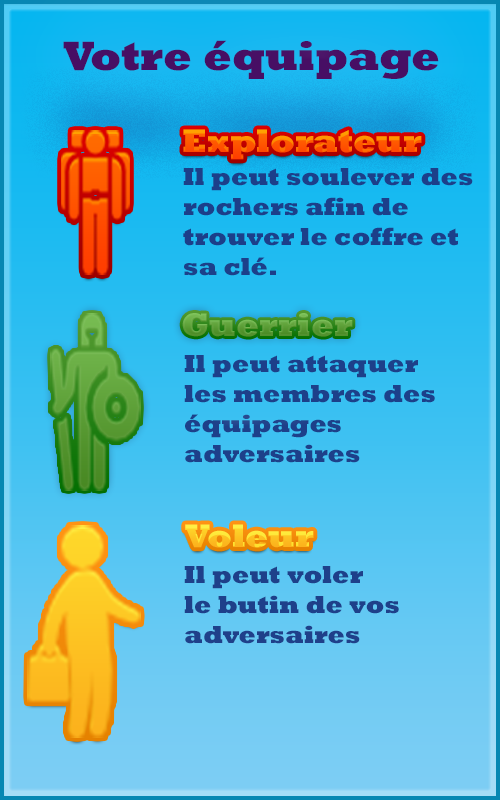
<style>
.page{position:relative;width:500px;height:800px}
.page>*{position:absolute;margin:0}
.t1{font:41.7px "Rockwell-ExtraBold";color:#470f64}
.t2{font:33.3px "Rockwell-ExtraBold"}
.t3{font:25px "Rockwell-ExtraBold";color:#1c3f8a}
.t4{font:33.3px "Rockwell-ExtraBold";color:#5ea03a}
.t5{font:25px "Rockwell-ExtraBold";color:#1d408a}
.t6{font:25px "Rockwell-ExtraBold";color:#1e408a}
</style>
<div class="page">
<p class="t1" style="left:63px;top:40px;width:376px;height:39px">Votre équipage</p>
<p class="t2" style="left:183px;top:129px;width:239px;height:31px">Explorateur</p>
<p class="t3" style="left:183px;top:168px;width:290px;height:108px">Il peut soulever des<br>rochers afin de <br>trouver le coffre et <br>sa clé.</p>
<p class="t4" style="left:182px;top:313px;width:171px;height:24px">Guerrier</p>
<p class="t5" style="left:184px;top:355px;width:251px;height:108px">Il peut attaquer <br>les membres des<br>équipages <br>adversaires</p>
<p class="t2" style="left:185px;top:524px;width:129px;height:24px">Voleur</p>
<p class="t6" style="left:184px;top:566px;width:215px;height:78px">Il peut voler<br>le butin de vos<br>adversaires</p>
</div>
